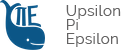
<style>
.page{position:relative;width:140px;height:50px;background:#ffffff}
.page>*{position:absolute;margin:0}
.t1{font:15px/14px "Raleway-Regular";letter-spacing:0.025em;color:#646363}
</style>
<div class="page">
<p class="t1" style="left:66px;top:5px;width:55px;height:42px">Upsilon<br>Pi<br>Epsilon</p>
</div>
